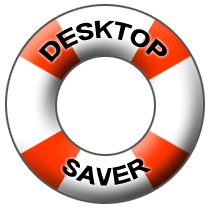
<style>
.page{position:relative;width:210px;height:210px;background:#ffffff}
.page>*{position:absolute;margin:0}
.t1{font:24px "ArialNarrow-Bold";color:#000000}
</style>
<div class="page">
<p class="t1" style="left:38px;top:20px;width:129px;height:43px">DESKTOP</p>
<p class="t1" style="left:62px;top:158px;width:89px;height:28px">SAVER</p>
</div>
